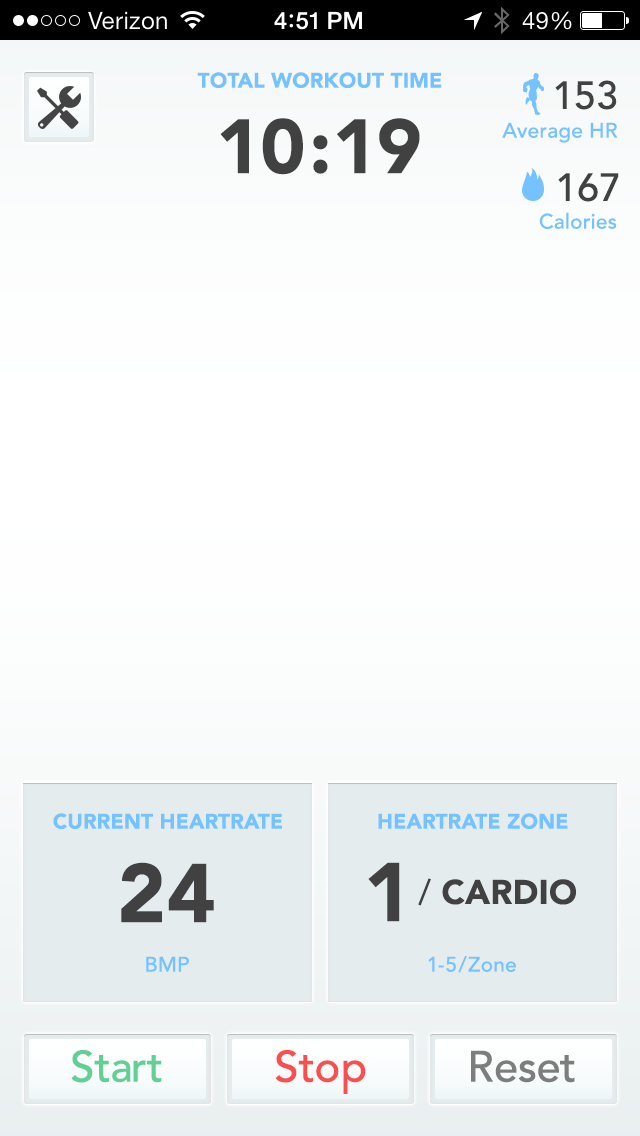
<style>
.page{position:relative;width:640px;height:1136px}
.page>*{position:absolute;margin:0}
.t1{font:20.9px "Avenir-Black";letter-spacing:0.01em;color:#74c2ff;text-transform:uppercase}
.t2{font:38.8px "Avenir-Medium";letter-spacing:0.01em;color:#414141}
.t3{font:76px "Avenir-Black";letter-spacing:0.01em;color:#414141}
.t4{font:20.9px "Avenir-Medium";letter-spacing:0.01em;color:#74c2ff}
.t5{font:82.3px "Avenir-Black";letter-spacing:0.01em;color:#414141;text-transform:uppercase}
.t6{font:33.8px "Avenir-Black";letter-spacing:0.01em;color:#414141;text-transform:uppercase}
.t7{font:33.8px "Avenir-Roman";letter-spacing:0.01em;color:#414141;text-transform:uppercase}
.t8{font:43.4px "Avenir-Medium";letter-spacing:0.01em;color:#60d095}
.t9{font:43.4px "Avenir-Medium";letter-spacing:0.01em;color:#f94f4f}
.t10{font:43.4px "Avenir-Medium";letter-spacing:0.01em;color:#7d7d7d}
</style>
<div class="page">
<p class="t1" style="left:197px;top:72px;width:245px;height:16px">total workout time</p>
<p class="t2" style="left:555px;top:80px;width:62px;height:30px">153</p>
<p class="t3" style="left:220px;top:118px;width:200px;height:57px">10:19</p>
<p class="t4" style="left:502px;top:122px;width:116px;height:21px">Average HR</p>
<p class="t2" style="left:558px;top:173px;width:61px;height:29px">167</p>
<p class="t4" style="left:539px;top:212px;width:78px;height:17px">Calories</p>
<p class="t1" style="left:53px;top:813px;width:229px;height:16px">Current Heartrate</p>
<p class="t1" style="left:378px;top:813px;width:190px;height:16px">Heartrate Zone</p>
<p class="t5" style="left:121px;top:862px;width:93px;height:61px">24</p>
<p class="t5" style="left:368px;top:862px;width:32px;height:60px">1</p>
<p class="t6" style="left:418px;top:878px;width:158px;height:28px"><span class="t7">/</span> cardio</p>
<p class="t4" style="left:146px;top:956px;width:43px;height:16px">BMP</p>
<p class="t4" style="left:428px;top:955px;width:88px;height:18px">1-5/Zone</p>
<p class="t8" style="left:71px;top:1050px;width:91px;height:33px">Start</p>
<p class="t9" style="left:275px;top:1050px;width:91px;height:44px">Stop</p>
<p class="t10" style="left:471px;top:1050px;width:104px;height:33px">Reset</p>
</div>
